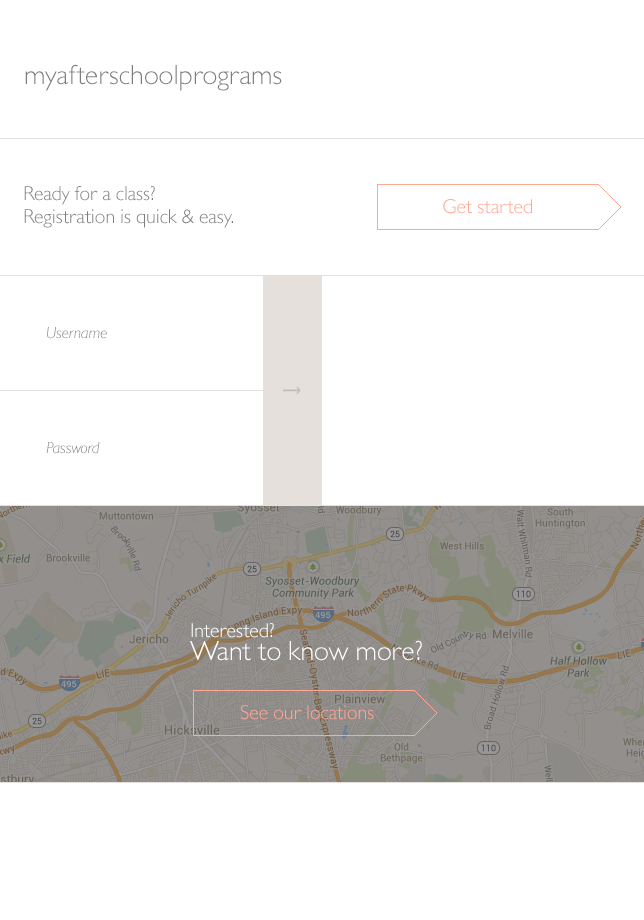
<style>
.page{position:relative;width:644px;height:920px;background:#ffffff}
.page>*{position:absolute;margin:0}
.t1{font:28px "GillSansMTPro-Light";color:#7f7c7a}
.t2{font:20px/23px "GillSansMTPro-Light";color:#7f7c7a}
.t3{font:16px "GillSansMTPro-LightItalic"}
.t4{font:16px "GillSansMTPro-LightItalic";color:#7f7c7a}
.t5{font:28px/23px "GillSansMTPro-Light";color:#ffffff}
.t6{font:20px/23px "GillSansMTPro-Light";color:#ffffff}
.t7{font:20px "GillSansMTPro-Light";color:#ffa894}
</style>
<div class="page">
<p class="t1" style="left:25px;top:64px;width:257px;height:27px">myafterschoolprograms</p>
<p class="t2" style="left:24px;top:186px;width:209px;height:42px">Ready for a class? <br>Registration is quick &amp; easy.</p>
<p class="t3" style="left:47px;top:327px;width:60px;height:12px">Username</p>
<p class="t4" style="left:46px;top:442px;width:54px;height:12px">Password</p>
<p class="t5" style="left:190px;top:623px;width:232px;height:38px"><span class="t6">Interested?<br></span>Want to know more?</p>
<p class="t7" style="left:241px;top:705px;width:133px;height:15px">See our locations</p>
</div>
